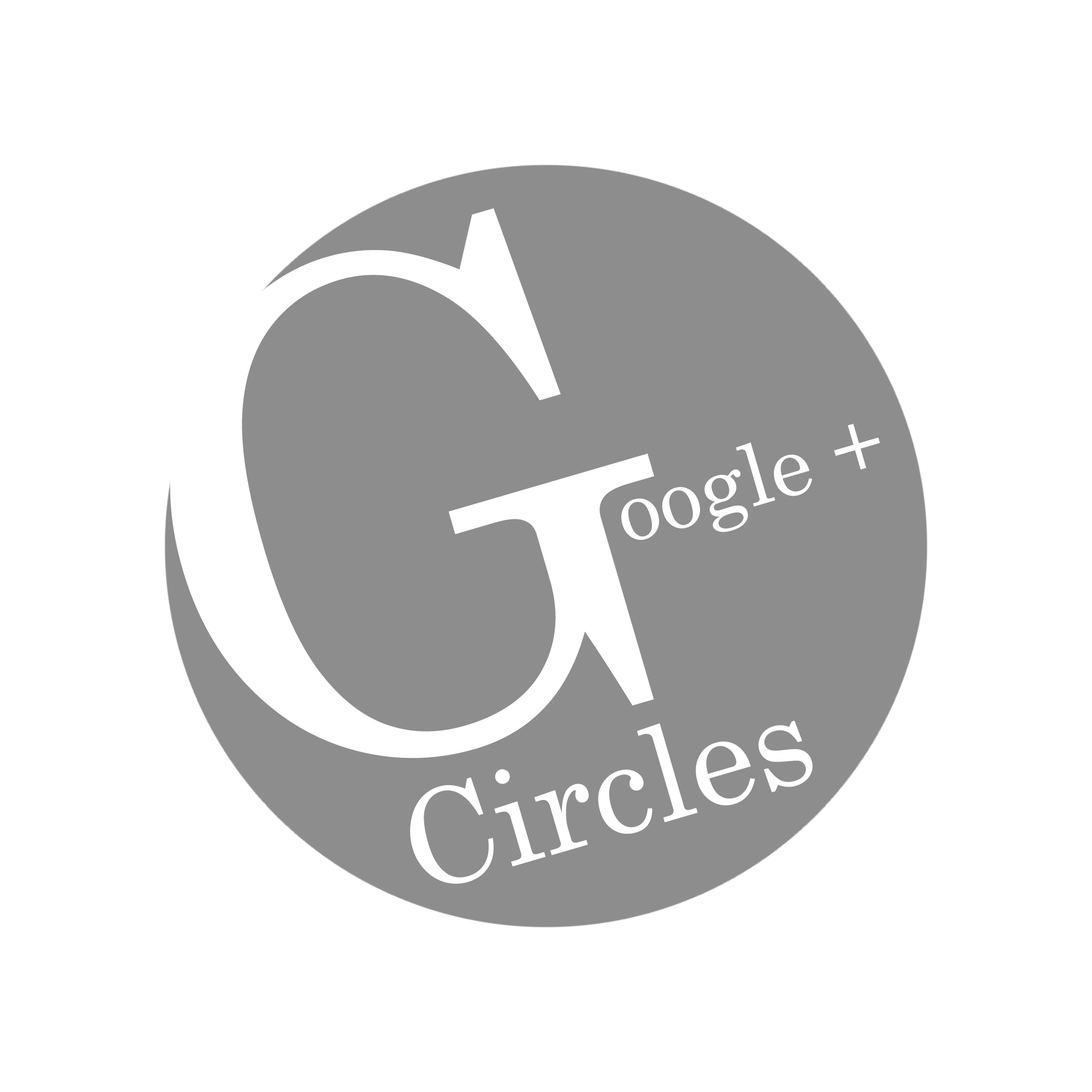
<style>
.page{position:relative;width:1092px;height:1092px;background:#ffffff}
.page>*{position:absolute;margin:0}
.t1{font:684.1px "Century";color:#ffffff}
.t2{font:85.2px "Century";color:#ffffff}
.t3{font:131.8px "Century";color:#ffffff}
</style>
<div class="page">
<p class="t1" style="left:170px;top:208px;width:484px;height:550px;rotate:-16deg">G</p>
<p class="t2" style="left:621px;top:424px;width:259px;height:116px;rotate:-16deg">oogle +</p>
<p class="t3" style="left:410px;top:721px;width:403px;height:163px;rotate:-16deg">Circles</p>
</div>
